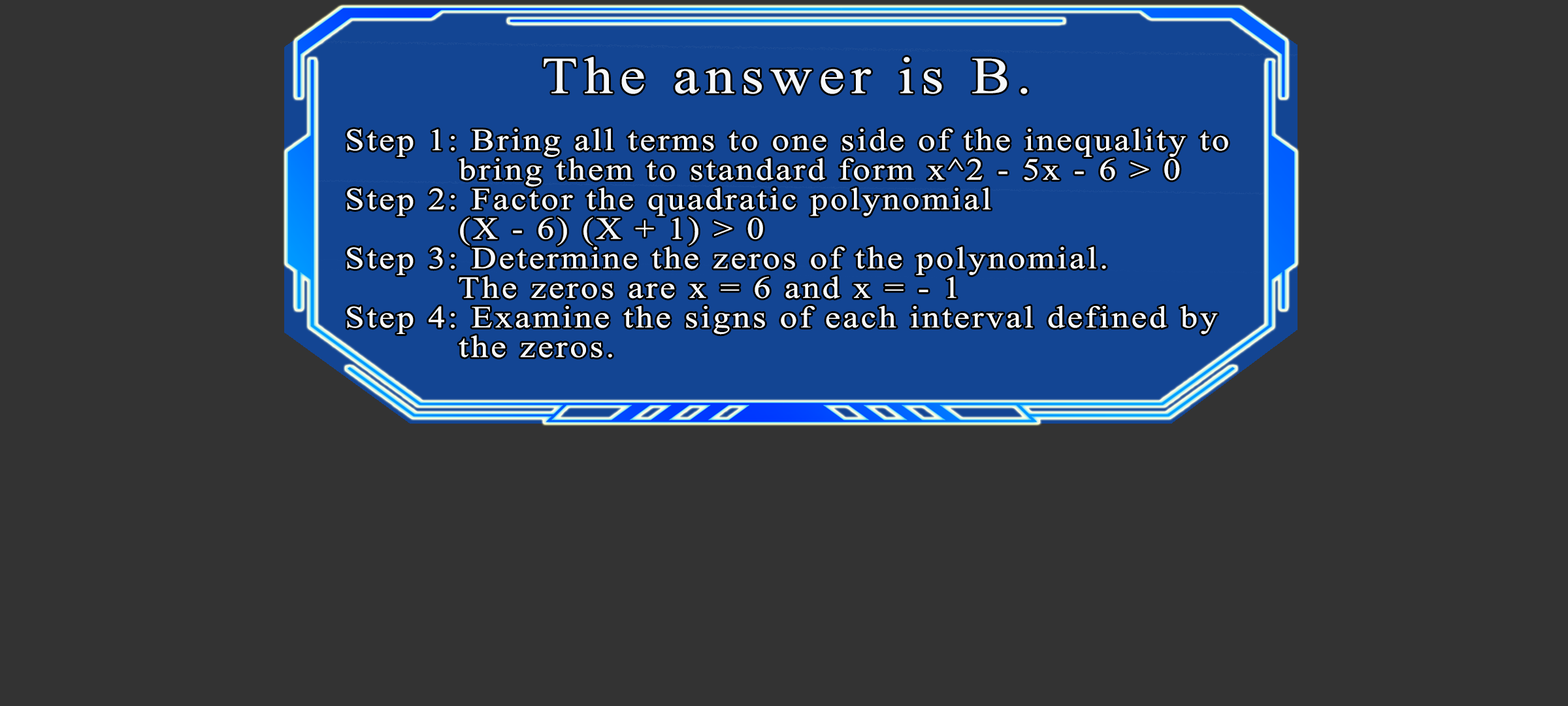
<style>
.page{position:relative;width:1568px;height:706px;background:#333333}
.page>*{position:absolute;margin:0}
.t1{font:51.7px "TimesNewRomanPSMT";letter-spacing:0.115em;color:#f7f9fb;scale:1.12 1}
.t2{font:30.9px/29.5px "TimesNewRomanPSMT";letter-spacing:0.075em;color:#f7f9fb;scale:1.12 1}
</style>
<div class="page">
<p class="t1" style="left:544px;top:57px;width:484px;height:37px">The answer is B.</p>
<p class="t2" style="left:347px;top:128px;width:881px;height:229px">Step 1: Bring all terms to one side of the inequality to<br>      bring them to standard form x^2 - 5x - 6 &gt; 0<br>Step 2: Factor the quadratic polynomial<br>      (X - 6) (X + 1) &gt; 0<br>Step 3: Determine the zeros of the polynomial.<br>      The zeros are x = 6 and x = - 1<br>Step 4: Examine the signs of each interval defined by<br>      the zeros.</p>
</div>
